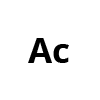
<style>
.page{position:relative;width:100px;height:100px;background:#ffffff}
.page>*{position:absolute;margin:0}
.t1{font:35px "OpenSans-Bold";color:#000000}
</style>
<div class="page">
<p class="t1" style="left:28px;top:38px;width:41px;height:25px">Ac</p>
</div>
